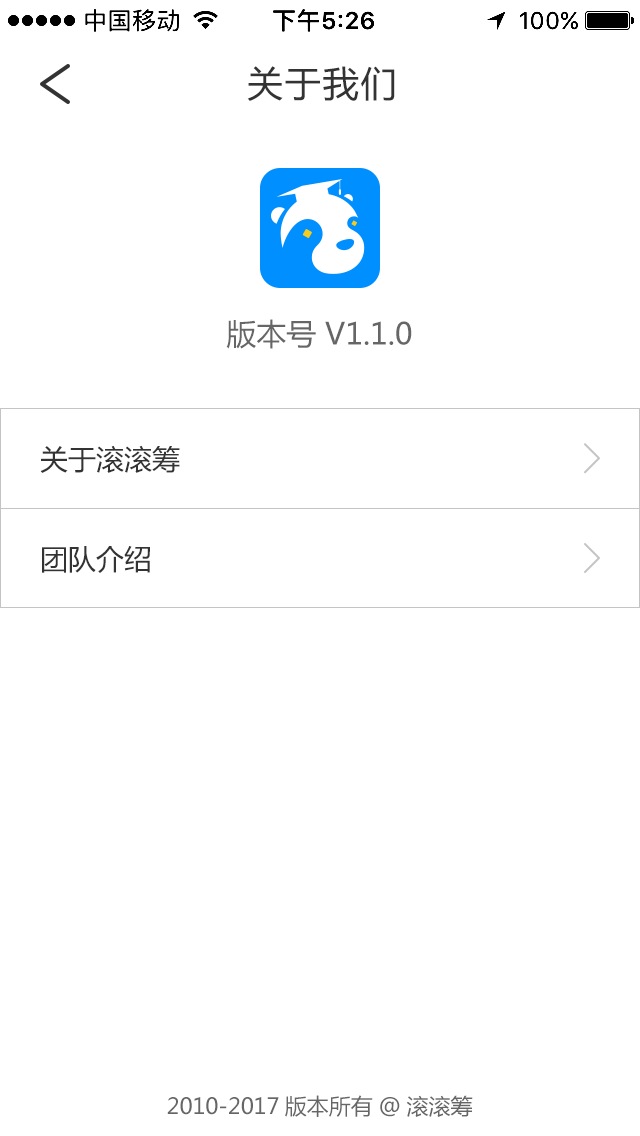
<style>
.page{position:relative;width:640px;height:1136px;background:#ffffff}
.page>*{position:absolute;margin:0}
.t1{font:36px "MicrosoftYaHei";letter-spacing:0.05em;color:#333333}
.t2{font:30px "MicrosoftYaHei";color:#666666}
.t3{font:28px "MicrosoftYaHei";color:#333333}
.t4{font:22px "MicrosoftYaHei";color:#666666}
</style>
<div class="page">
<p class="t1" style="left:247px;top:66px;width:148px;height:35px">关于我们</p>
<p class="t2" style="left:226px;top:319px;width:186px;height:30px">版本号 V1.1.0</p>
<p class="t3" style="left:40px;top:445px;width:140px;height:28px">关于滚滚筹</p>
<p class="t3" style="left:42px;top:546px;width:108px;height:27px">团队介绍</p>
<p class="t4" style="left:167px;top:1095px;width:306px;height:22px">2010-2017版本所有@滚滚筹</p>
</div>
